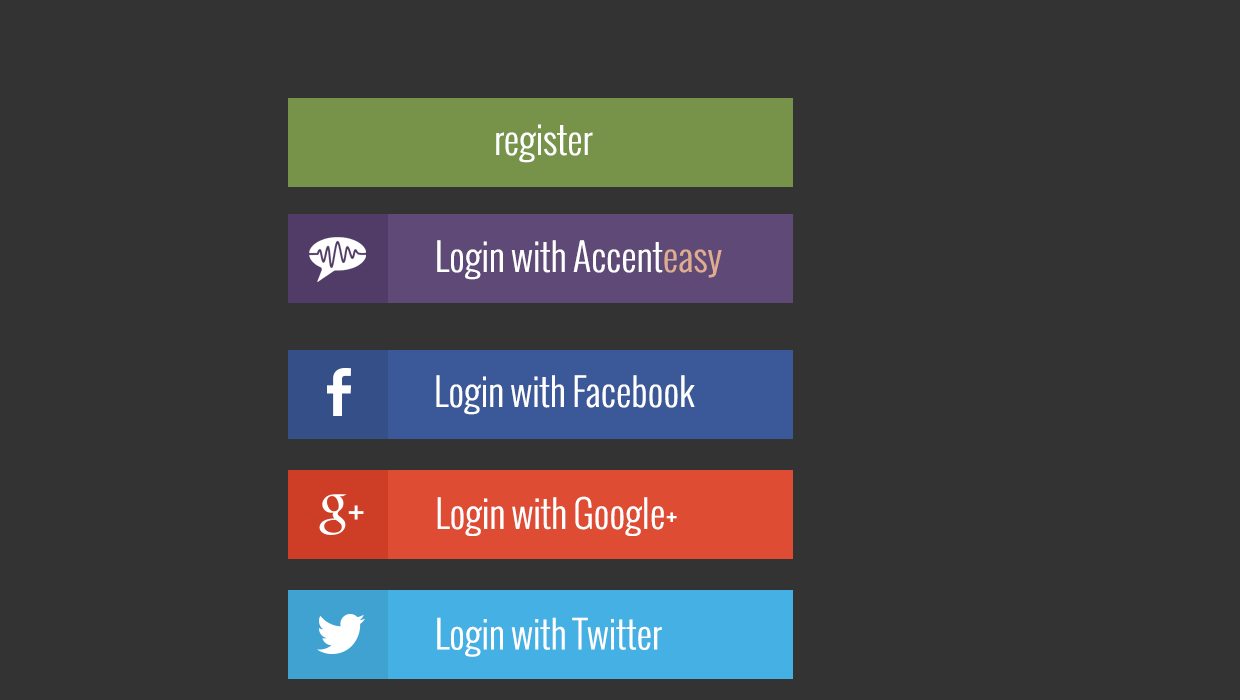
<style>
.page{position:relative;width:1240px;height:700px;background:#333333}
.page>*{position:absolute;margin:0}
.t1{font:37.5px "Oswald-Light";color:#ffffff}
.t2{font:37.5px "Oswald-Light";color:#dfac90}
</style>
<div class="page">
<p class="t1" style="left:496px;top:124px;width:97px;height:39px">register</p>
<p class="t1" style="left:437px;top:240px;width:285px;height:40px">Login with Accent<span class="t2">easy</span></p>
<p class="t1" style="left:436px;top:375px;width:259px;height:40px">Login with Facebook</p>
<p class="t1" style="left:437px;top:496px;width:240px;height:40px">Login with Google+</p>
<p class="t1" style="left:437px;top:617px;width:225px;height:40px">Login with Twitter</p>
</div>
